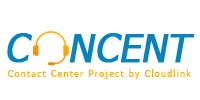
<style>
.page{position:relative;width:200px;height:100px;background:#ffffff}
.page>*{position:absolute;margin:0}
.t1{font:38px "Tahoma";color:#0483be;font-weight:bold;font-style:italic}
.t2{font:8.8px "Tahoma";letter-spacing:0.15em;color:#ffae00}
</style>
<div class="page">
<p class="t1" style="left:7px;top:33px;width:188px;height:30px">C   NCENT</p>
<p class="t2" style="left:8px;top:69px;width:183px;height:10px">Contact Center Project by Cloudlink</p>
</div>
